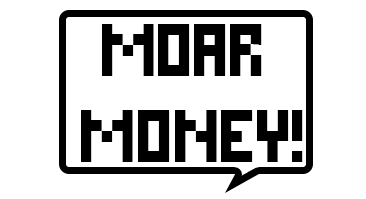
<style>
.page{position:relative;width:366px;height:199px;background:#ffffff}
.page>*{position:absolute;margin:0}
.t1{font:72px "DSPixelCyr";color:#000000}
</style>
<div class="page">
<p class="t1" style="left:81px;top:24px;width:222px;height:138px;text-align:center">MOAR <br>MONEY!</p>
</div>
